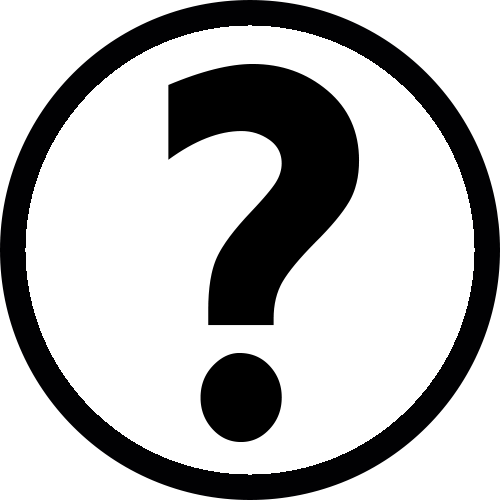
<style>
.page{position:relative;width:500px;height:500px;background:#ffffff}
.page>*{position:absolute;margin:0}
.t1{font:537.9px "AbadiMT-CondensedExtraBold";letter-spacing:0.1em;color:#000000;scale:0.91 1}
</style>
<div class="page">
<p class="t1" style="left:168px;top:64px;width:192px;height:378px">?</p>
</div>
